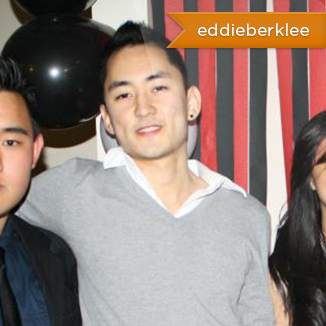
<style>
.page{position:relative;width:326px;height:326px}
.page>*{position:absolute;margin:0}
.t1{font:17px "Gotham-Book";letter-spacing:0.02em;color:#ffffff}
</style>
<div class="page">
<p class="t1" style="left:198px;top:23px;width:111px;height:13px">eddieberklee</p>
</div>
